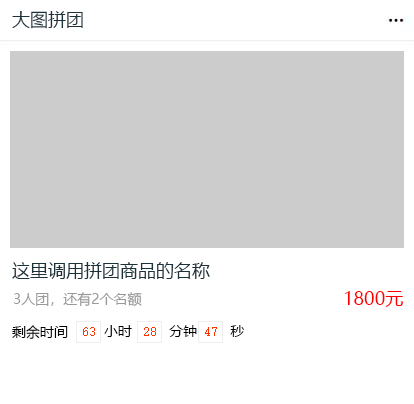
<style>
.page{position:relative;width:414px;height:404px;background:#ffffff}
.page>*{position:absolute;margin:0}
.t1{font:18px "MicrosoftYaHei";color:#1b323a}
.t2{font:14px "MicrosoftYaHei";color:#999999}
.t3{font:18px "MicrosoftYaHei";color:#ff0000}
.t4{font:14px "MicrosoftYaHei";color:#000000}
</style>
<div class="page">
<p class="t1" style="left:12px;top:11px;width:71px;height:18px">大图拼团</p>
<p class="t1" style="left:12px;top:262px;width:198px;height:17px">这里调用拼团商品的名称</p>
<p class="t2" style="left:13px;top:292px;width:129px;height:15px">3人团，还有2个名额</p>
<p class="t3" style="left:344px;top:291px;width:59px;height:16px">1800元</p>
<p class="t4" style="left:12px;top:325px;width:56px;height:14px">剩余时间</p>
<p class="t4" style="left:104px;top:325px;width:140px;height:12px">小时         分钟        秒</p>
</div>
